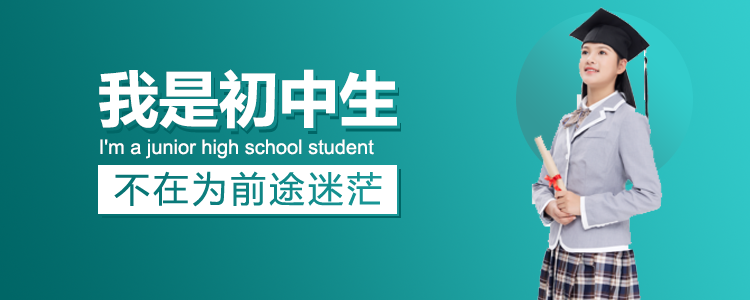
<style>
.page{position:relative;width:750px;height:300px}
.page>*{position:absolute;margin:0}
.t1{font:60px "MicrosoftYaHei-Bold";color:#ffffff}
.t2{font:20px "ArialMT";color:#ffffff}
</style>
<div class="page">
<p class="t1" style="left:99px;top:69px;width:298px;height:60px">我是初中生</p>
<p class="t2" style="left:100px;top:139px;width:274px;height:20px">I'm a junior high school student</p>
</div>
